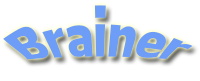
<style>
.page{position:relative;width:200px;height:81px;background:#ffffff}
.page>*{position:absolute;margin:0}
.t1{font:37.5px "Tahoma-Bold";color:#6d9df6}
</style>
<div class="page">
<p class="t1" style="left:3px;top:5px;width:190px;height:55px">Brainer</p>
</div>
